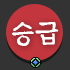
<style>
.page{position:relative;width:70px;height:70px;background:#333333}
.page>*{position:absolute;margin:0}
.t1{font:26.7px "ChosunCentennial";letter-spacing:-0.01em;color:#ffffff}
</style>
<div class="page">
<p class="t1" style="left:11px;top:22px;width:48px;height:24px">승급</p>
</div>
